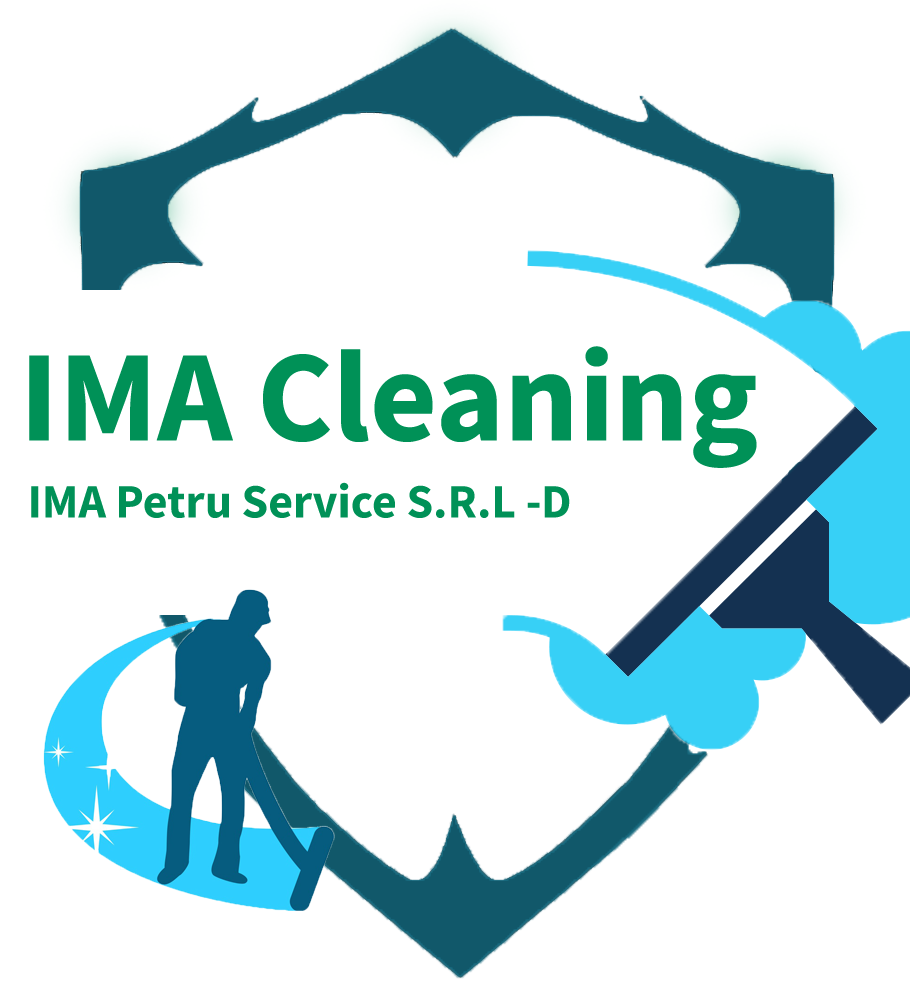
<style>
.page{position:relative;width:910px;height:1000px;background:#ffffff}
.page>*{position:absolute;margin:0}
.t1{font:130px "SourceSansRoman-Bold";color:#009157}
.t2{font:48px "SourceSansRoman-Bold";color:#009157}
</style>
<div class="page">
<p class="t1" style="left:29px;top:346px;width:728px;height:122px">IMA Cleaning</p>
<p class="t2" style="left:31px;top:482px;width:539px;height:36px">IMA Petru Service S.R.L -D</p>
</div>
